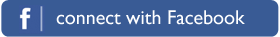
<style>
.page{position:relative;width:280px;height:37px;background:#395b95}
.page>*{position:absolute;margin:0}
.t1{font:19.9px "GillSans";color:#ffffff}
</style>
<div class="page">
<p class="t1" style="left:56px;top:10px;width:189px;height:15px">connect with Facebook</p>
</div>
